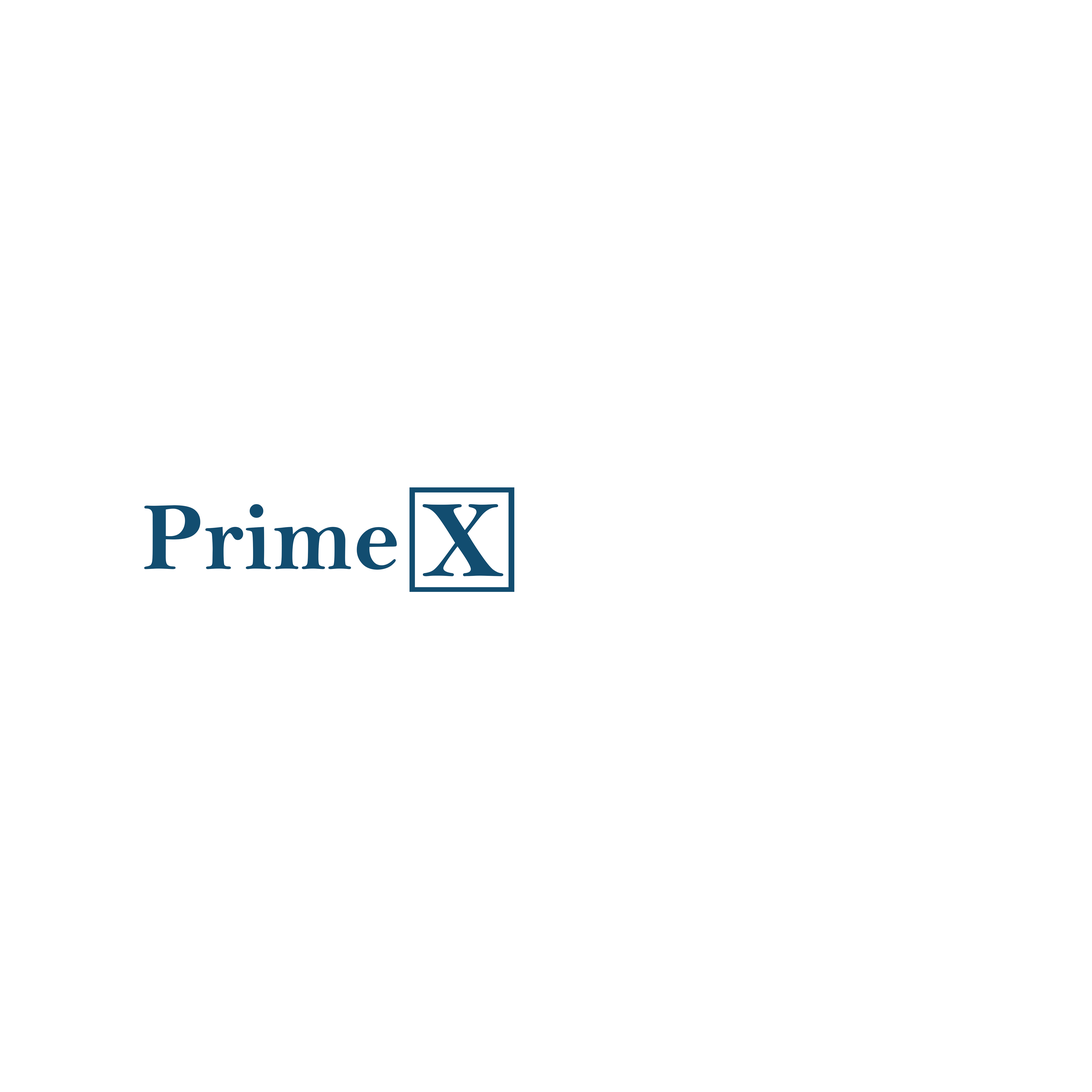
<style>
.page{position:relative;width:1092px;height:1092px;background:#ffffff}
.page>*{position:absolute;margin:0}
.t1{font:97.1px "BellMTBold";color:#124d70}
.t2{font:110.7px "BellMTBold";color:#124d70}
</style>
<div class="page">
<p class="t1" style="left:144px;top:504px;width:253px;height:66px">Prime</p>
<p class="t2" style="left:423px;top:504px;width:80px;height:72px">X</p>
</div>
